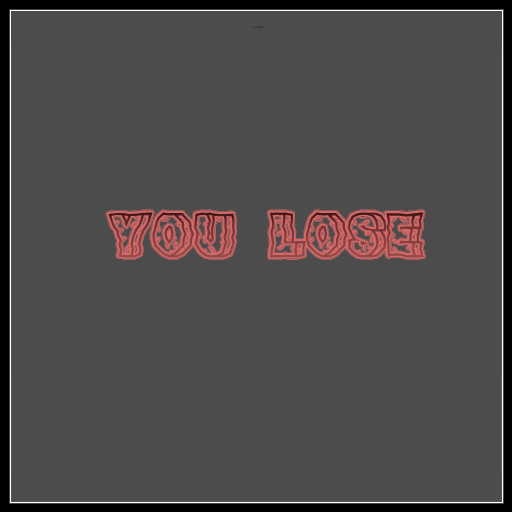
<style>
.page{position:relative;width:512px;height:512px;background:#4c4c4c}
.page>*{position:absolute;margin:0}
.t1{font:45px "RockFont"}
</style>
<div class="page">
<p class="t1" style="left:108px;top:212px;width:316px;height:46px">YOU      LOSE</p>
</div>
